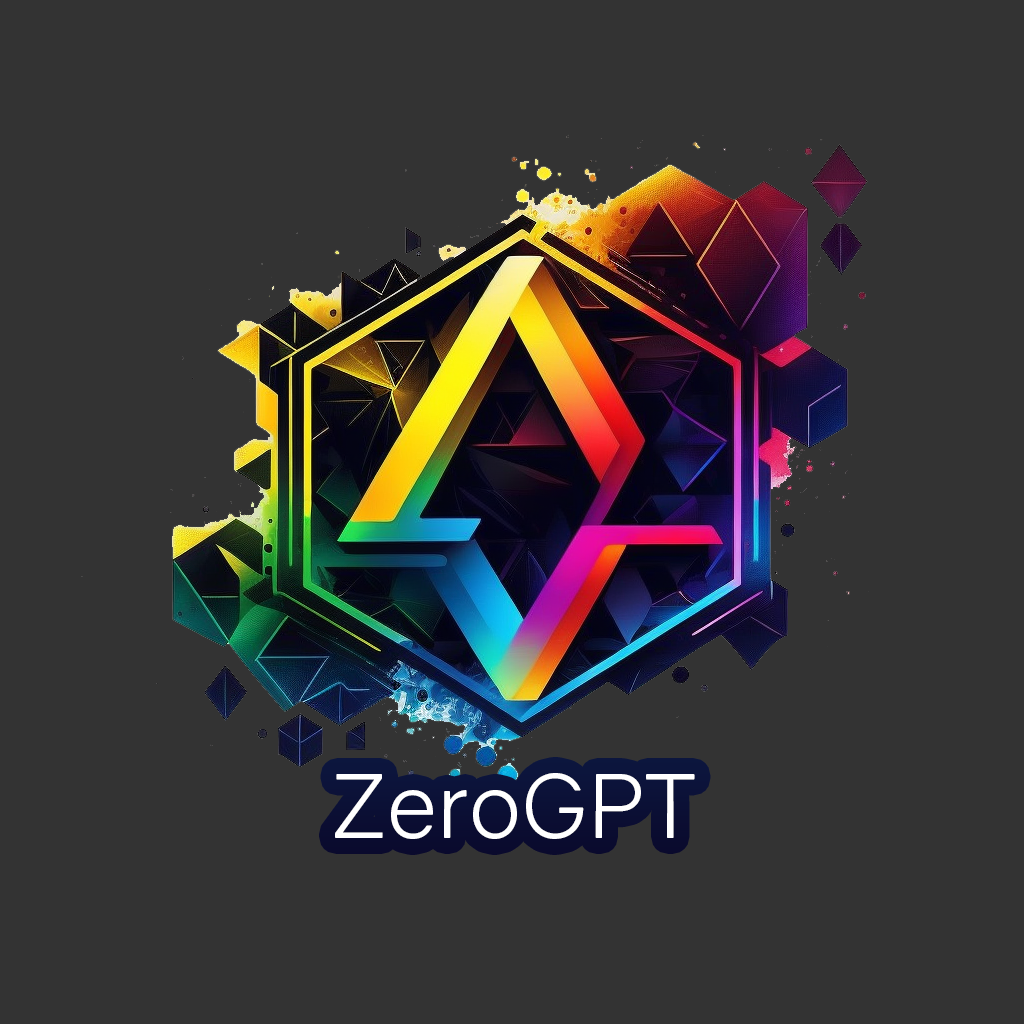
<style>
.page{position:relative;width:1024px;height:1024px;background:#333333}
.page>*{position:absolute;margin:0}
.t1{font:89px "Gravity-Book";color:#ffffff}
</style>
<div class="page">
<p class="t1" style="left:335px;top:773px;width:360px;height:66px">ZeroGPT</p>
</div>
